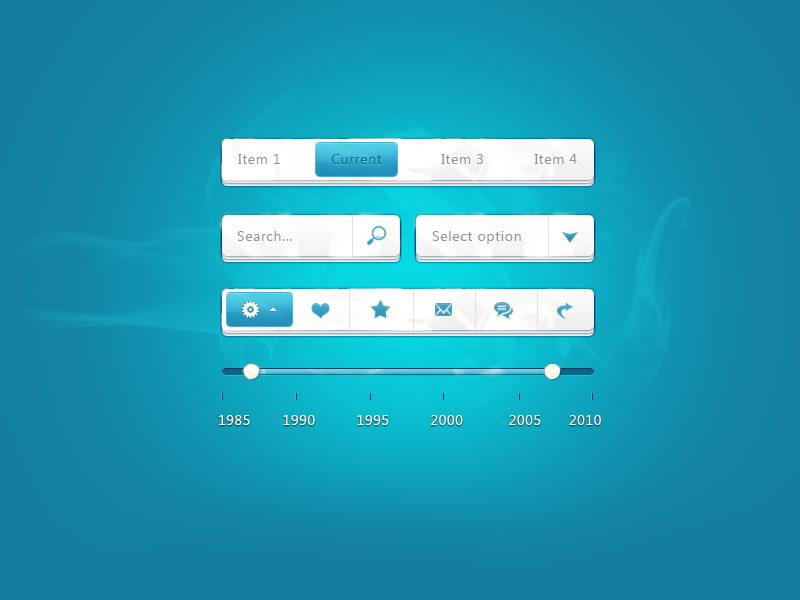
<style>
.page{position:relative;width:800px;height:600px}
.page>*{position:absolute;margin:0}
.t1{font:14px "SegoeUI";letter-spacing:0.05em;color:#959595}
.t2{font:14px "SegoeUI";letter-spacing:0.05em;color:#136786}
.t3{font:14px "SegoeUI";letter-spacing:0.05em;color:#ffffff}
</style>
<div class="page">
<p class="t1" style="left:238px;top:154px;width:339px;height:10px">Item 1           <span class="t2">Current             </span>Item 3           Item 4</p>
<p class="t1" style="left:237px;top:231px;width:55px;height:10px">Search...</p>
<p class="t1" style="left:432px;top:231px;width:89px;height:13px">Select option</p>
<p class="t3" style="left:219px;top:415px;width:382px;height:10px">1985       1990         1995         2000          2005      2010</p>
</div>
